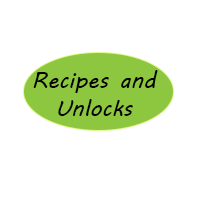
<style>
.page{position:relative;width:200px;height:200px;background:#ffffff}
.page>*{position:absolute;margin:0}
.t1{font:23px "MVBoli";color:#000000}
</style>
<div class="page">
<p class="t1" style="left:33px;top:70px;width:125px;height:46px;text-align:center">Recipes and Unlocks</p>
</div>
